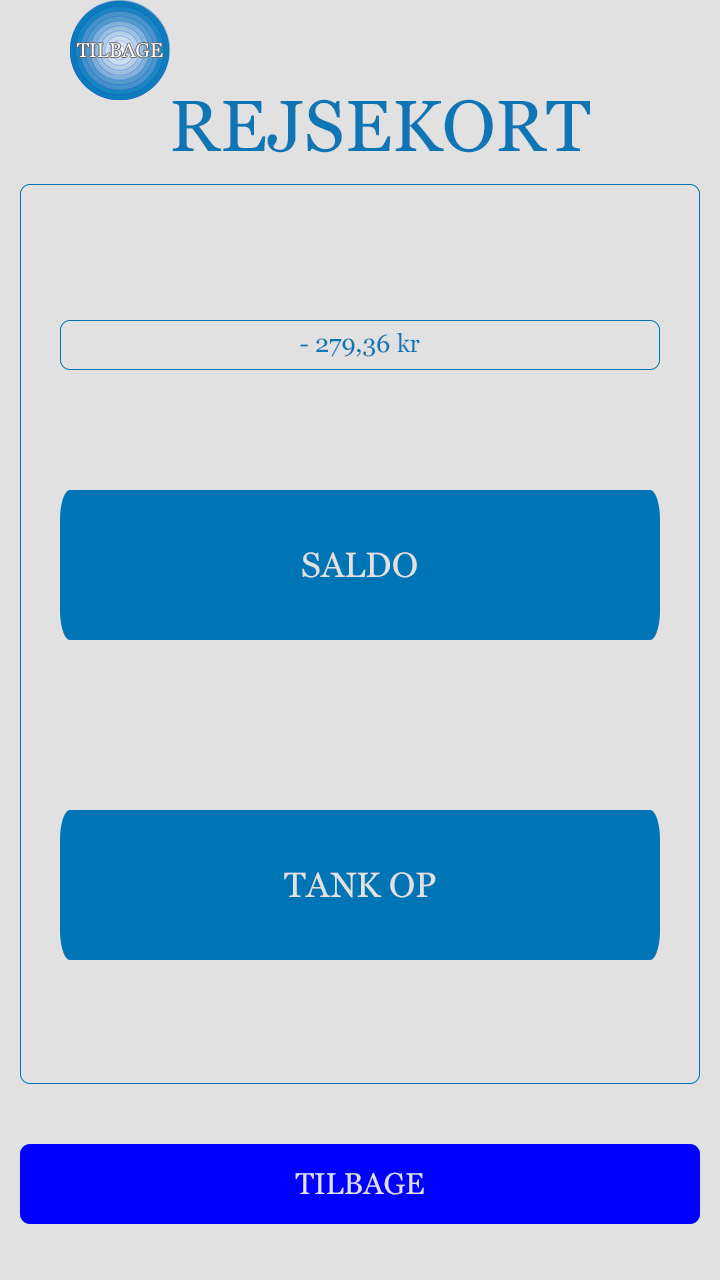
<style>
.page{position:relative;width:720px;height:1280px;background:#e1e1e1}
.page>*{position:absolute;margin:0}
.t1{font:72px "Georgia";color:#0f76b5}
.t2{font:25px "Georgia";color:#0f76b5}
.t3{font:35px "Georgia";color:#e1e1e1}
.t4{font:30px "Georgia";color:#e1e1e1}
</style>
<div class="page">
<p class="t1" style="left:172px;top:99px;width:418px;height:54px">REJSEKORT</p>
<p class="t2" style="left:300px;top:333px;width:120px;height:24px">- 279,36 kr</p>
<p class="t3" style="left:302px;top:552px;width:115px;height:26px">SALDO</p>
<p class="t3" style="left:284px;top:872px;width:152px;height:26px">TANK OP</p>
<p class="t4" style="left:295px;top:1172px;width:129px;height:23px">TILBAGE</p>
</div>
